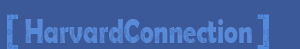
<style>
.page{position:relative;width:300px;height:49px;background:#3b5999}
.page>*{position:absolute;margin:0}
.t1{font:35.1px "BerlinSansFBDemi-Bold";color:#598ad7;scale:0.74 1}
</style>
<div class="page">
<p class="t1" style="left:25px;top:19px;width:227px;height:24px">HarvardConnection</p>
</div>
